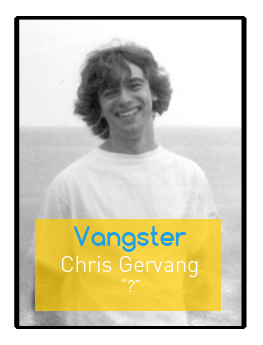
<style>
.page{position:relative;width:263px;height:345px;background:#ffffff}
.page>*{position:absolute;margin:0}
.t1{font:22.2px "DIN-Light";color:#ffffff}
.t2{font:25px "Comfortaa-Bold";color:#20a0ea}
.t3{font:16.7px "DIN-LightItalicAlt";color:#ffffff}
</style>
<div class="page">
<p class="t1" style="left:62px;top:226px;width:136px;height:66px;text-align:center"><span class="t2">Vangster<br></span>Chris Gervang<br><span class="t3">“?”</span></p>
</div>
